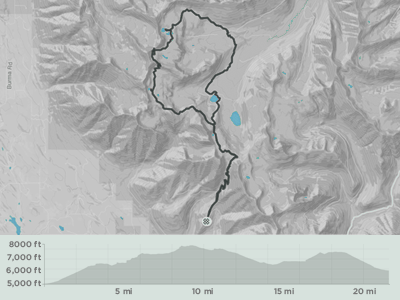
<style>
.page{position:relative;width:400px;height:300px}
.page>*{position:absolute;margin:0}
.t1{font:8px/13px "Gotham-Medium";color:#777777}
.t2{font:8px "Gotham-Medium";color:#777777}
</style>
<div class="page">
<p class="t1" style="left:6px;top:241px;width:35px;height:47px;text-align:right">8000 ft<br>7,000 ft<br>6,000 ft<br>5,000 ft</p>
<p class="t2" style="left:115px;top:288px;width:17px;height:7px">5 mi</p>
<p class="t2" style="left:192px;top:288px;width:21px;height:7px">10 mi</p>
<p class="t2" style="left:274px;top:288px;width:20px;height:7px">15 mi</p>
<p class="t2" style="left:353px;top:288px;width:23px;height:7px">20 mi</p>
</div>
